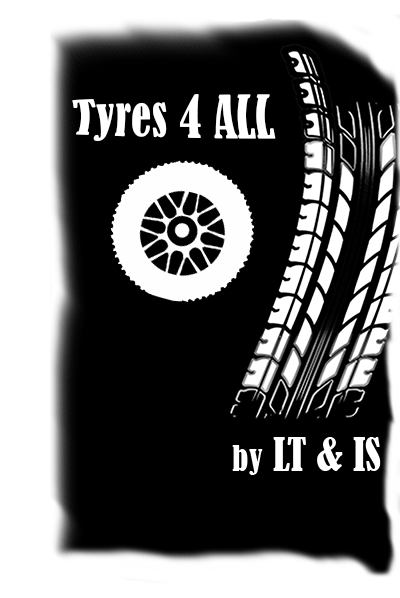
<style>
.page{position:relative;width:400px;height:598px;background:#000000}
.page>*{position:absolute;margin:0}
.t1{font:12px "BernardMT-Condensed";color:#ffffff}
</style>
<div class="page">
<p class="t1" style="left:72px;top:94px;width:204px;height:47px">Tyres 4 ALL</p>
</div>
